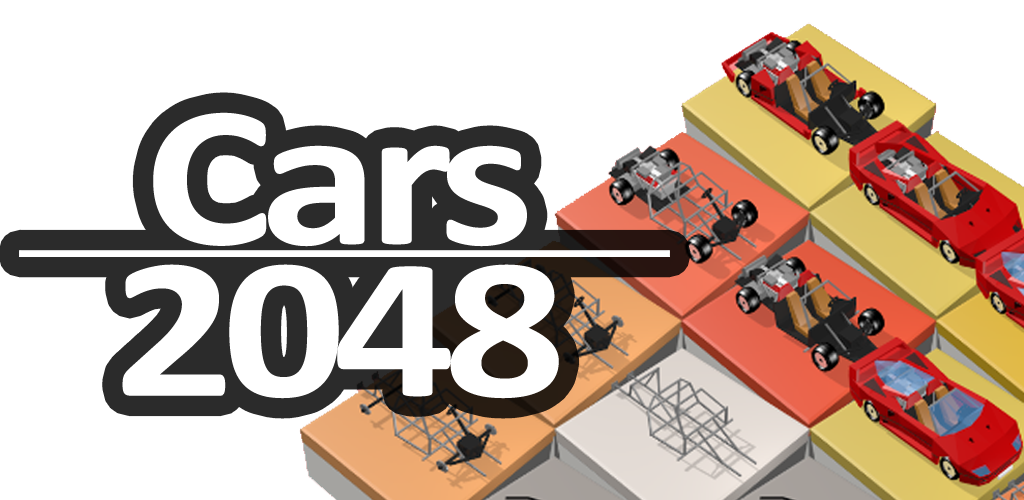
<style>
.page{position:relative;width:1024px;height:500px;background:#ffffff}
.page>*{position:absolute;margin:0}
.t1{font:203.7px/152px "Calibri-Bold";letter-spacing:-0.05em;color:#ffffff;scale:1.19 1}
</style>
<div class="page">
<p class="t1" style="left:122px;top:112px;width:437px;height:287px;text-align:center">Cars<br>2048</p>
</div>
